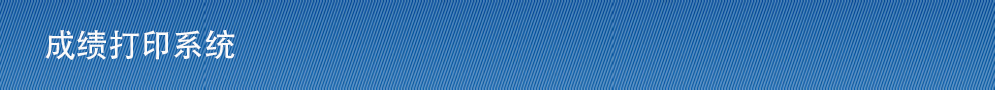
<style>
.page{position:relative;width:995px;height:90px}
.page>*{position:absolute;margin:0}
.t1{font:32px "AdobeHeitiStd-Regular";color:#fafafa}
</style>
<div class="page">
<p class="t1" style="left:45px;top:29px;width:190px;height:31px">成绩打印系统</p>
</div>
